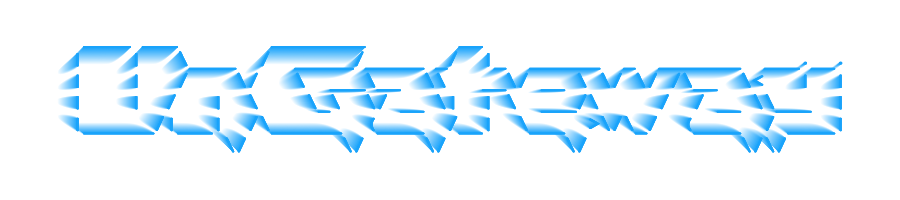
<style>
.page{position:relative;width:900px;height:200px;background:#ffffff}
.page>*{position:absolute;margin:0}
.t1{font:18px "CourierNewPS-BoldMT";letter-spacing:0.025em;color:#19a3fb;font-variant:small-caps;font-weight:bold}
</style>
<div class="page">
<p class="t1" style="left:76px;top:46px;width:767px;height:107px">____ ___        ________        __                               <br>|    |   \____  /  _____/_____ _/  |_  ______  _  _______  ___.__.<br>|    |   /    \/   \  ___\__  \\   __\/ __ \ \/ \/ /\__  \&lt;   |  |<br>|    |  /   |  \    \_\  \/ __ \|  | \  ___/\     /  / __ \\___  |<br>|______/|___|  /\______  (____  /__|  \___  &gt;\/\_/  (____  / ____|<br>             \/        \/     \/          \/             \/\/</p>
</div>
